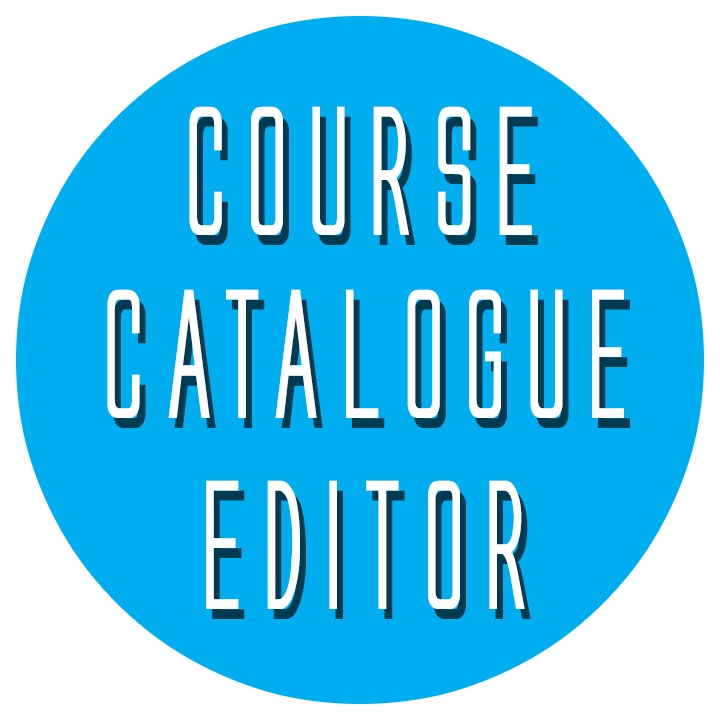
<style>
.page{position:relative;width:720px;height:720px;background:#00aeef}
.page>*{position:absolute;margin:0}
.t1{font:170px "AlienLeagueBold";color:#ffffff;scale:0.85 1}
</style>
<div class="page">
<p class="t1" style="left:189px;top:106px;width:343px;height:129px">Course</p>
<p class="t1" style="left:107px;top:289px;width:517px;height:129px">CAtAlogue</p>
<p class="t1" style="left:206px;top:480px;width:319px;height:129px">EDiTOR</p>
</div>
